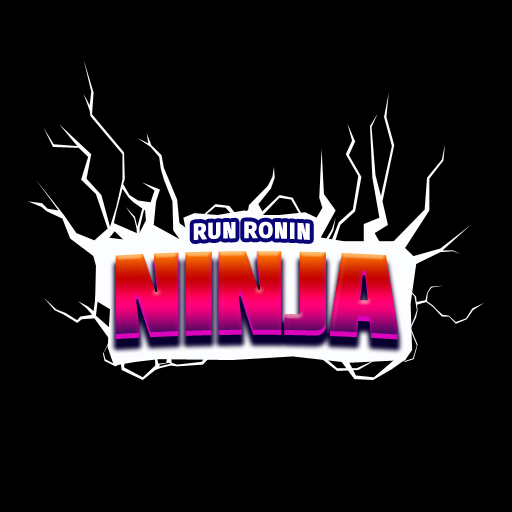
<style>
.page{position:relative;width:512px;height:512px;background:#000000}
.page>*{position:absolute;margin:0}
.t1{font:22.7px "FiraSans-Heavy";letter-spacing:0.05em;color:#ffffff;scale:0.96 1}
.t2{font:119px "Molot";letter-spacing:-0.025em}
</style>
<div class="page">
<p class="t1" style="left:193px;top:221px;width:117px;height:19px">RUN RONIN</p>
<p class="t2" style="left:115px;top:251px;width:283px;height:89px">nINJA</p>
</div>
